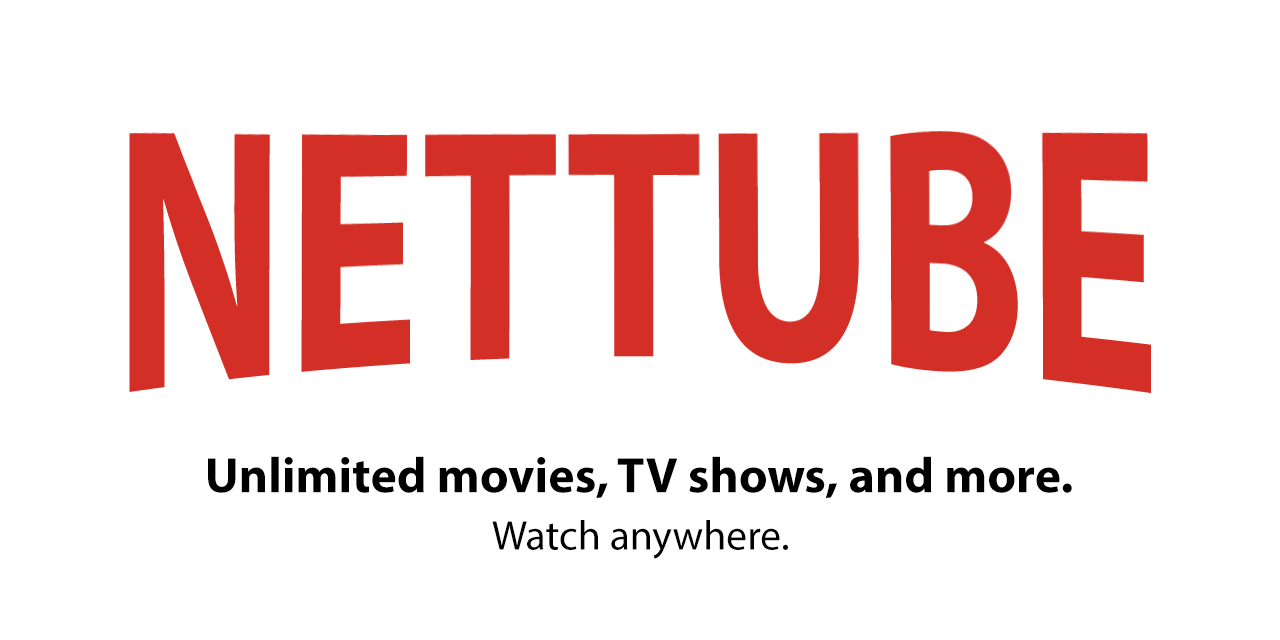
<style>
.page{position:relative;width:1280px;height:640px;background:#ffffff}
.page>*{position:absolute;margin:0}
.t1{font:50px "MyriadPro-Bold";color:#000000}
.t2{font:41.7px "MyriadPro-Regular";color:#000000}
</style>
<div class="page">
<p class="t1" style="left:208px;top:456px;width:864px;height:42px">Unlimited movies, TV shows, and more.</p>
<p class="t2" style="left:492px;top:520px;width:296px;height:39px">Watch anywhere.</p>
</div>
